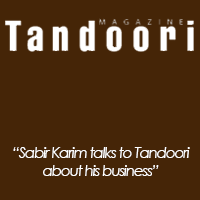
<style>
.page{position:relative;width:200px;height:200px;background:#452507}
.page>*{position:absolute;margin:0}
.t1{font:15px "CenturyGothic-Italic";letter-spacing:-0.075em;color:#ffffff}
</style>
<div class="page">
<p class="t1" style="left:13px;top:147px;width:177px;height:29px;text-align:center">“Sabir Karim talks to Tandoori<br>about his business”</p>
</div>
